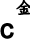
<style>
.page{position:relative;width:30px;height:39px;background:#ffffff}
.page>*{position:absolute;margin:0}
.t1{font:27px "ArialMT";color:#000000;font-weight:bold}
</style>
<div class="page">
<p class="t1" style="left:0px;top:23px;width:14px;height:16px">c</p>
</div>
